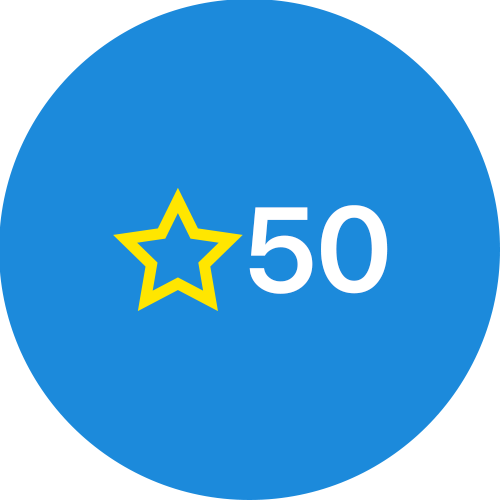
<style>
.page{position:relative;width:500px;height:500px;background:#1c8adb}
.page>*{position:absolute;margin:0}
.t1{font:120px "SFProDisplay-Semibold";color:#ffffff}
</style>
<div class="page">
<p class="t1" style="left:249px;top:205px;width:139px;height:89px">50</p>
</div>
